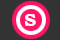
<style>
.page{position:relative;width:60px;height:40px;background:#333333}
.page>*{position:absolute;margin:0}
.t1{font:18px "BookmanOldStyle-Bold";letter-spacing:-0.1em;color:#ffffff}
</style>
<div class="page">
<p class="t1" style="left:24px;top:14px;width:12px;height:12px">S</p>
</div>
